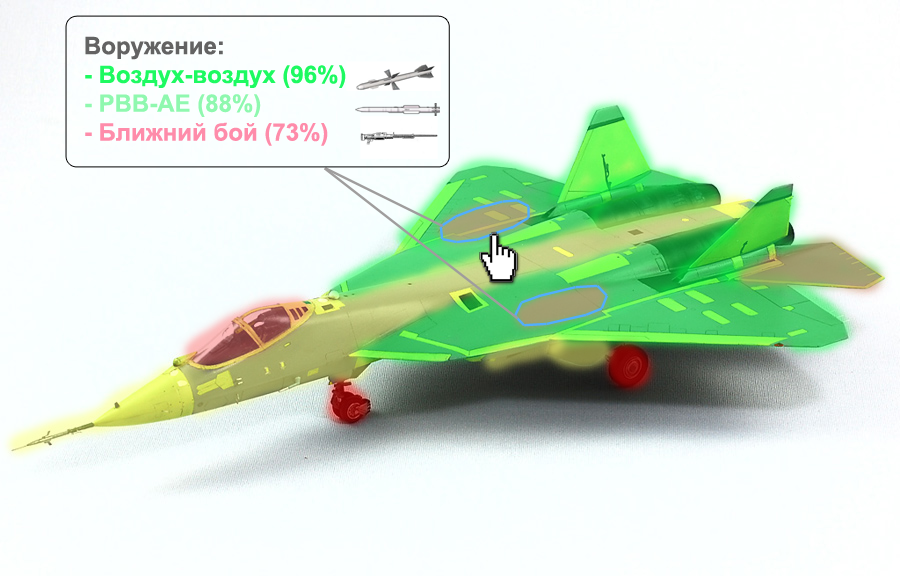
<style>
.page{position:relative;width:900px;height:576px}
.page>*{position:absolute;margin:0}
.t1{font:24px "Arial-BoldMT";color:#1dfa61}
.t2{font:24px "Arial-BoldMT";color:#636363}
.t3{font:24px "Arial-BoldMT";color:#8ff8af}
.t4{font:24px "Arial-BoldMT";color:#fe8caa}
</style>
<div class="page">
<p class="t1" style="left:85px;top:36px;width:261px;height:110px"><span class="t2">Воружение:<br></span>- Воздух-воздух (96%)<br><span class="t3">- PBB-AE (88%)<br></span><span class="t4">- Ближний бой (73%)</span></p>
</div>
